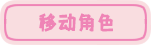
<style>
.page{position:relative;width:151px;height:45px;background:#f9dde0}
.page>*{position:absolute;margin:0}
.t1{font:12px "shetumodengxiaofangti";color:#ef84b6;font-weight:bold;scale:0.94 1}
</style>
<div class="page">
<p class="t1" style="left:39px;top:13px;width:74px;height:19px">移动角色</p>
</div>
